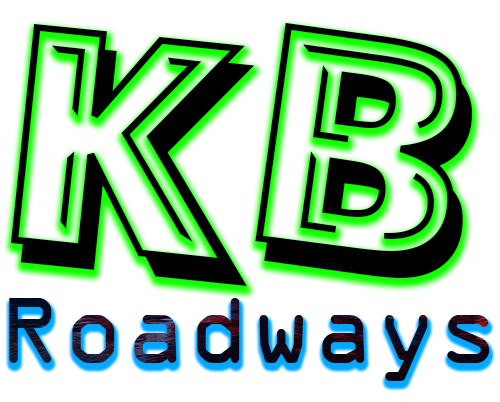
<style>
.page{position:relative;width:500px;height:402px;background:#ffffff}
.page>*{position:absolute;margin:0}
.t1{font:316.7px "AlphabetSoupBT-Tilt";color:#000000}
.t2{font:101.3px "OCRAbyBT-Regular"}
</style>
<div class="page">
<p class="t1" style="left:10px;top:23px;width:463px;height:263px">KB</p>
<p class="t2" style="left:9px;top:298px;width:481px;height:83px">Roadways</p>
</div>
